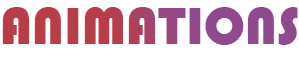
<style>
.page{position:relative;width:299px;height:58px;background:#ffffff}
.page>*{position:absolute;margin:0}
.t1{font:54.3px "Bauhaus93"}
</style>
<div class="page">
<p class="t1" style="left:2px;top:7px;width:296px;height:38px">ANIMATIONS</p>
</div>
